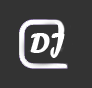
<style>
.page{position:relative;width:92px;height:88px;background:#333333}
.page>*{position:absolute;margin:0}
.t1{font:28.6px "ForteMT";color:#ffffff}
</style>
<div class="page">
<p class="t1" style="left:30px;top:33px;width:35px;height:25px">DJ</p>
</div>
